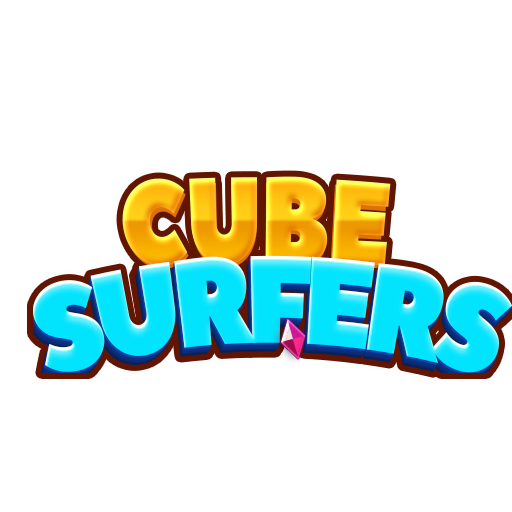
<style>
.page{position:relative;width:512px;height:512px;background:#ffffff}
.page>*{position:absolute;margin:0}
.t1{font:115px "PeaceSans";letter-spacing:-0.025em;scale:0.83 1}
.t2{font:112.7px "PeaceSans";letter-spacing:-0.025em;scale:0.83 1}
.t3{font:124.6px "PeaceSans";letter-spacing:-0.075em;color:#02e3fd;scale:0.77 1}
</style>
<div class="page">
<p class="t1" style="left:122px;top:176px;width:269px;height:90px">CUBE</p>
<p class="t2" style="left:125px;top:181px;width:263px;height:88px">CUBE</p>
<p class="t3" style="left:33px;top:255px;width:480px;height:118px">SURFERS</p>
</div>
